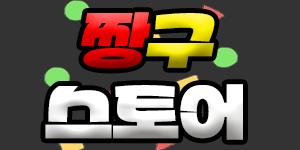
<style>
.page{position:relative;width:300px;height:150px;background:#333333}
.page>*{position:absolute;margin:0}
.t1{font:60px/72px "Partial-Sans-KR"}
.t2{font:60px/72px "Partial-Sans-KR";font-style:italic}
</style>
<div class="page">
<p class="t1" style="left:45px;top:12px;width:198px;height:128px;text-align:center"><span class="t2">짱</span><span class="t2">구<br></span>스토어</p>
</div>
